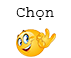
<style>
.page{position:relative;width:71px;height:58px;background:#ffffff}
.page>*{position:absolute;margin:0}
.t1{font:12px "CourierNewPSMT";color:#000000}
</style>
<div class="page">
<p class="t1" style="left:16px;top:7px;width:38px;height:13px">Chọn</p>
</div>
